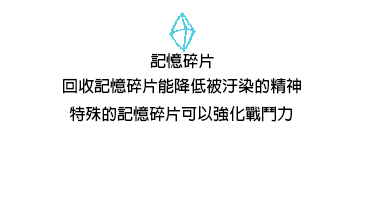
<style>
.page{position:relative;width:384px;height:216px;background:#ffffff}
.page>*{position:absolute;margin:0}
.t1{font:16px "AdobeFanHeitiStd-Bold";color:#000000}
</style>
<div class="page">
<p class="t1" style="left:150px;top:53px;width:64px;height:16px">記憶碎片</p>
<p class="t1" style="left:63px;top:78px;width:238px;height:44px">回收記憶碎片能降低被汙染的精神<br>  特殊的記憶碎片可以強化戰鬥力</p>
</div>
